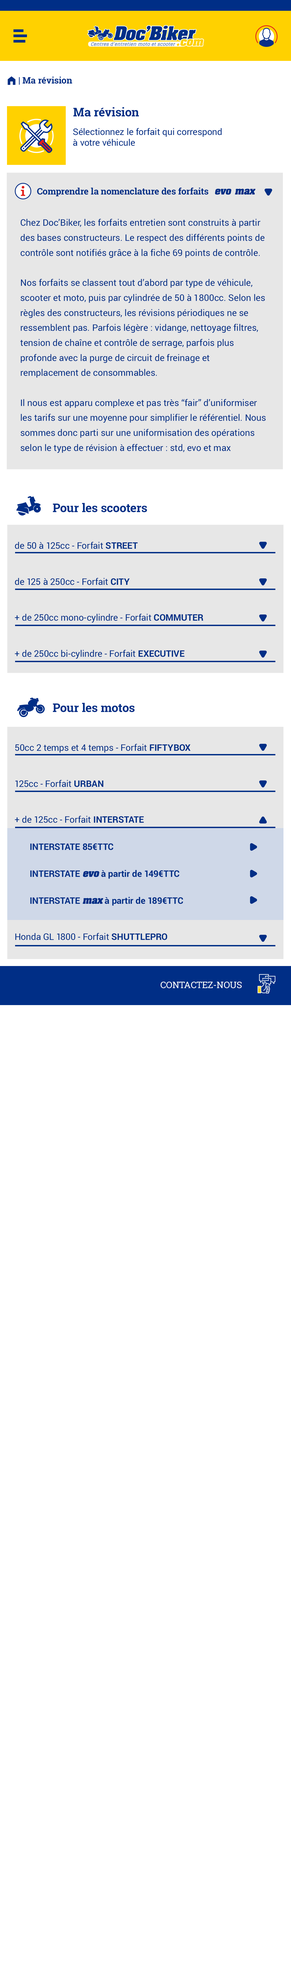
<style>
.page{position:relative;width:291px;height:1987px;background:#ffffff}
.page>*{position:absolute;margin:0}
.t1{font:9px "RobotoSlab-Bold";color:#002e86}
.t2{font:9px "FoundationIconsGeneral-Reg";color:#002e86}
.t3{font:12px "RobotoSlab-Bold";color:#002e86}
.t4{font:9px "Roboto-Regular";color:#002e86}
.t5{font:9px "Aachen-Bold";color:#002e86;font-style:italic}
.t6{font:9px/15px "Roboto-Regular";color:#002e86}
.t7{font:9px/36px "Roboto-Regular";color:#002e86}
.t8{font:9px/36px "Roboto-Bold";color:#002e86}
.t9{font:9px/27px "Roboto-Bold";color:#002e86;text-transform:uppercase}
.t10{font:9px/27px "Aachen-Bold";color:#002e86;font-style:italic}
.t11{font:9px/27px "Roboto-Bold";color:#002e86}
.t12{font:9px "RobotoSlab-Regular";color:#ffffff;text-transform:uppercase}
</style>
<div class="page">
<p class="t1" style="left:8px;top:76px;width:64px;height:9px"><span class="t2">m </span>| Ma révision</p>
<p class="t3" style="left:73px;top:107px;width:66px;height:10px">Ma révision</p>
<p class="t4" style="left:73px;top:128px;width:149px;height:18px">Sélectionnez le forfait qui correspond <br>à votre véhicule</p>
<p class="t1" style="left:37px;top:187px;width:171px;height:9px">Comprendre la nomenclature des forfaits</p>
<p class="t5" style="left:215px;top:189px;width:16px;height:6px">evo</p>
<p class="t5" style="left:235px;top:189px;width:20px;height:6px">max</p>
<p class="t6" style="left:20px;top:219px;width:246px;height:234px">Chez Doc’Biker, les forfaits entretien sont construits à partir des bases constructeurs. Le respect des différents points de contrôle sont notifiés grâce à la fiche 69 points de contrôle. <br><br>Nos forfaits se classent tout d’abord par type de véhicule, scooter et moto, puis par cylindrée de 50 à 1800cc. Selon les règles des constructeurs, les révisions périodiques ne se ressemblent pas. Parfois légère : vidange, nettoyage filtres, tension de chaîne et contrôle de serrage, parfois plus profonde avec la purge de circuit de freinage et remplacement de consommables.<br><br>Il nous est apparu complexe et pas très “fair” d’uniformiser les tarifs sur une moyenne pour simplifier le référentiel. Nous sommes donc parti sur une uniformisation des opérations selon le type de révision à effectuer : std, evo et max</p>
<p class="t3" style="left:53px;top:503px;width:94px;height:9px">Pour les scooters</p>
<p class="t7" style="left:15px;top:542px;width:188px;height:117px">de 50 à 125cc - Forfait <span class="t8">STREET<br></span>de 125 à 250cc - Forfait <span class="t8">CITY<br></span>+ de 250cc mono-cylindre - Forfait <span class="t8">COMMUTER<br></span>+ de 250cc bi-cylindre - Forfait <span class="t8">EXECUTIVE</span></p>
<p class="t3" style="left:53px;top:703px;width:82px;height:9px">Pour les motos</p>
<p class="t7" style="left:15px;top:744px;width:175px;height:196px">50cc 2 temps et 4 temps - Forfait <span class="t8">FIFTYBOX<br></span>125cc - Forfait <span class="t8">URBAN<br></span>+ de 125cc - Forfait <span class="t8">INTERSTATE<br></span><span class="t9">interstate 85€TTC <br>interstate </span><span class="t10">evo</span><span class="t11"> à partir de </span><span class="t9">149€TTC <br>interstate </span><span class="t10">max</span><span class="t11"> à partir de </span><span class="t9">189€TTC <br></span>Honda GL 1800 - Forfait <span class="t8">SHUTTLEPRO</span></p>
<p class="t12" style="left:161px;top:981px;width:81px;height:7px">contactez-nous</p>
</div>
